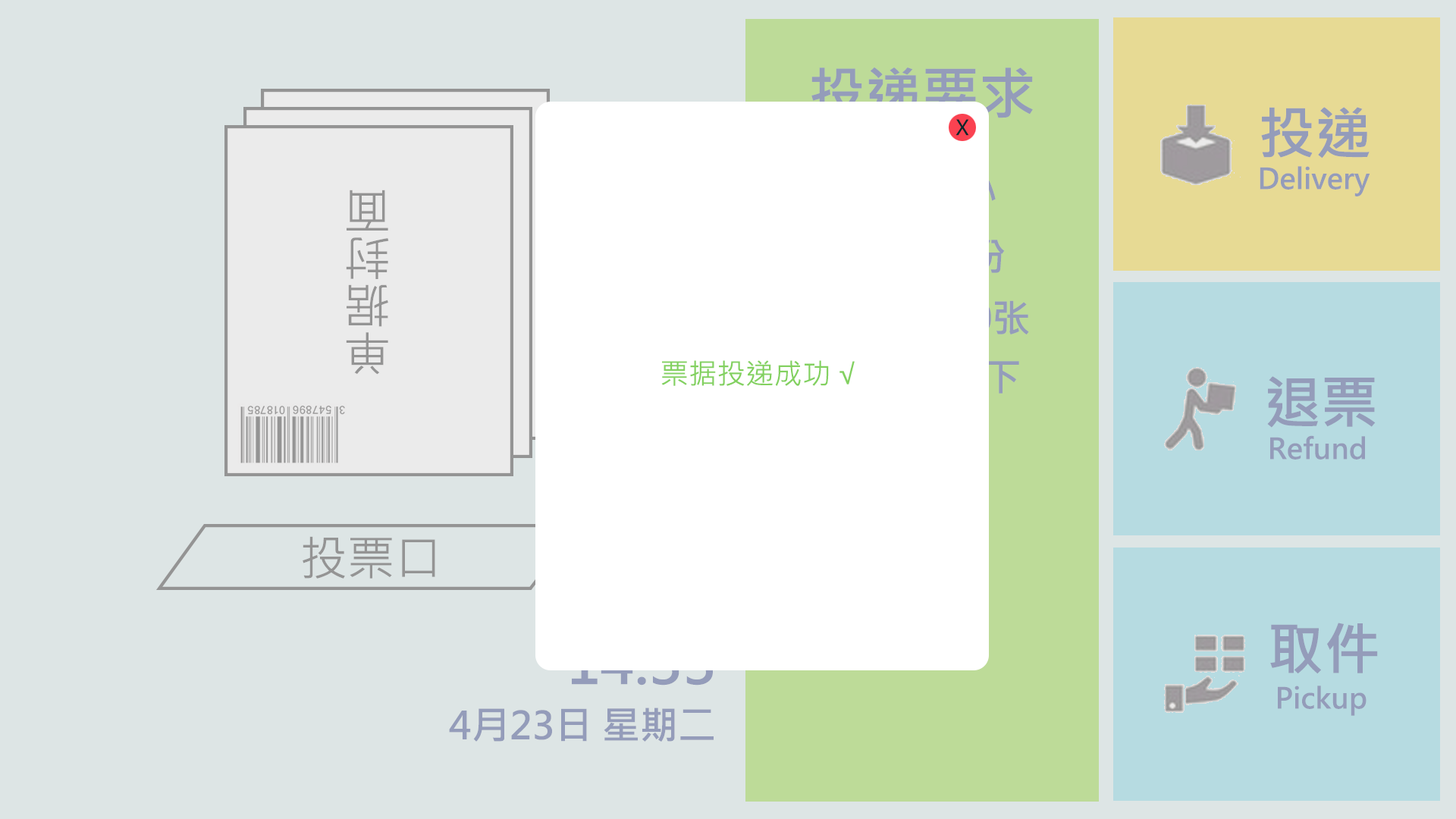
<style>
.page{position:relative;width:1456px;height:819px;background:#dde5e5}
.page>*{position:absolute;margin:0}
.t1{font:56.9px "MicrosoftJhengHeiBold";color:#949cba}
.t2{font:28.4px "MicrosoftJhengHeiBold";color:#949cba}
.t3{font:47.4px "MicrosoftJhengHeiRegular";color:#949494}
.t4{font:28.4px "MicrosoftJhengHeiRegular";color:#83d160}
.t5{font:56.9px "MicrosoftJhengHeiBold"}
.t6{font:37.9px "MicrosoftJhengHeiBold";color:#949cba}
</style>
<div class="page">
<p class="t1" style="left:811px;top:67px;width:222px;height:51px">投递要求</p>
<p class="t1" style="left:1261px;top:107px;width:109px;height:51px">投递</p>
<p class="t2" style="left:1260px;top:166px;width:110px;height:30px">Delivery</p>
<p class="t3" style="left:346px;top:190px;width:43px;height:185px;rotate:180deg">单据封面</p>
<p class="t4" style="left:661px;top:360px;width:194px;height:26px">票据投递成功 √</p>
<p class="t1" style="left:1267px;top:376px;width:109px;height:52px">退票</p>
<p class="t2" style="left:1270px;top:435px;width:95px;height:25px">Refund</p>
<p class="t3" style="left:303px;top:536px;width:132px;height:43px">投票口</p>
<p class="t1" style="left:1270px;top:623px;width:108px;height:51px">取件</p>
<p class="t5" style="left:571px;top:640px;width:142px;height:46px">14:33</p>
<p class="t2" style="left:1278px;top:686px;width:88px;height:30px">Pickup</p>
<p class="t6" style="left:449px;top:708px;width:265px;height:34px">4月23日 星期二</p>
</div>
